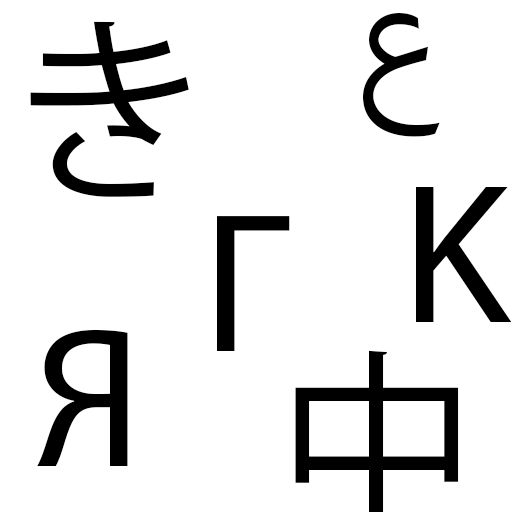
<style>
.page{position:relative;width:512px;height:512px;background:#ffffff}
.page>*{position:absolute;margin:0}
.t1{font:200px "MyriadArabic-Regular";color:#000000}
.t2{font:200px "KozGoPr6N-Regular";color:#000000}
.t3{font:200px "MyriadPro-Regular";color:#000000}
</style>
<div class="page">
<p class="t1" style="left:363px;top:13px;width:77px;height:124px">ع</p>
<p class="t2" style="left:30px;top:21px;width:159px;height:176px">き</p>
<p class="t3" style="left:416px;top:187px;width:96px;height:135px">K</p>
<p class="t3" style="left:217px;top:216px;width:73px;height:135px">Γ</p>
<p class="t3" style="left:37px;top:329px;width:91px;height:137px">Я</p>
</div>
